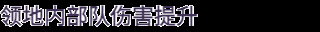
<style>
.page{position:relative;width:320px;height:32px;background:#000000}
.page>*{position:absolute;margin:0}
.t1{font:22px "WebPSD-18463539-0-Regular";color:#3f3254;font-weight:bold}
</style>
<div class="page">
<p class="t1" style="left:0px;top:0px;width:320px;height:32px">领地内部队伤害提升</p>
</div>
